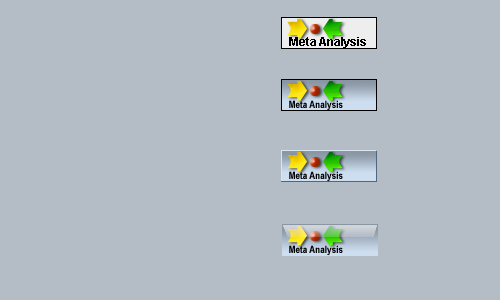
<style>
.page{position:relative;width:500px;height:300px;background:#b4bcc5}
.page>*{position:absolute;margin:0}
.t1{font:12px "Arial-BoldMT";color:#000000}
.t2{font:10px "ArialNarrow-Bold";color:#000000}
</style>
<div class="page">
<p class="t1" style="left:289px;top:37px;width:77px;height:11px">Meta Analysis</p>
<p class="t2" style="left:289px;top:100px;width:54px;height:10px">Meta Analysis</p>
<p class="t2" style="left:289px;top:171px;width:54px;height:10px">Meta Analysis</p>
<p class="t2" style="left:289px;top:245px;width:54px;height:10px">Meta Analysis</p>
</div>
